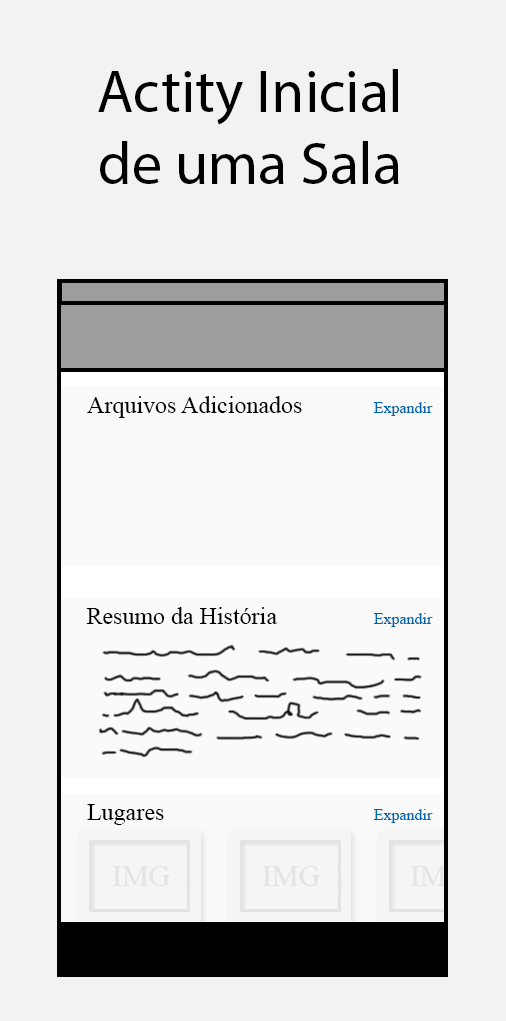
<style>
.page{position:relative;width:506px;height:1021px;background:#f2f2f2}
.page>*{position:absolute;margin:0}
.t1{font:60px "MyriadPro-Regular";color:#000000}
.t2{font:24px "TimesNewRomanPSMT";color:#000000}
.t3{font:16px "TimesNewRomanPSMT";color:#0066ad}
.t4{font:30px "TimesNewRomanPSMT";color:#e3e3e3}
</style>
<div class="page">
<p class="t1" style="left:98px;top:69px;width:301px;height:115px;text-align:center">Actity Inicial<br>de uma Sala</p>
<p class="t2" style="left:87px;top:396px;width:215px;height:22px">Arquivos Adicionados</p>
<p class="t3" style="left:374px;top:402px;width:59px;height:14px">Expandir</p>
<p class="t2" style="left:86px;top:607px;width:192px;height:17px">Resumo da História</p>
<p class="t3" style="left:374px;top:613px;width:59px;height:14px">Expandir</p>
<p class="t2" style="left:87px;top:804px;width:77px;height:21px">Lugares</p>
<p class="t3" style="left:374px;top:809px;width:59px;height:14px">Expandir</p>
<p class="t4" style="left:112px;top:866px;width:58px;height:20px">IMG</p>
<p class="t4" style="left:262px;top:866px;width:58px;height:20px">IMG</p>
</div>
